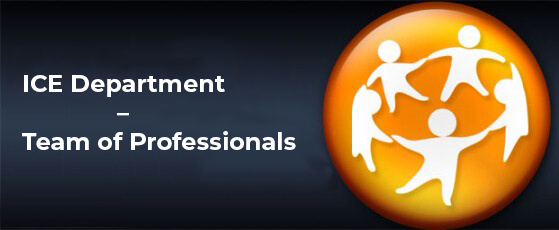
<style>
.page{position:relative;width:559px;height:230px}
.page>*{position:absolute;margin:0}
.t1{font:24px "Montserrat-Bold";color:#ffffff}
</style>
<div class="page">
<p class="t1" style="left:22px;top:75px;width:274px;height:75px">ICE Department <br>              –<br>Team of Professionals</p>
</div>
